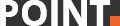
<style>
.page{position:relative;width:120px;height:26px;background:#333333}
.page>*{position:absolute;margin:0}
.t1{font:36px "OpenSans-Bold";color:#ffffff}
</style>
<div class="page">
<p class="t1" style="left:0px;top:0px;width:110px;height:26px">POINT</p>
</div>
